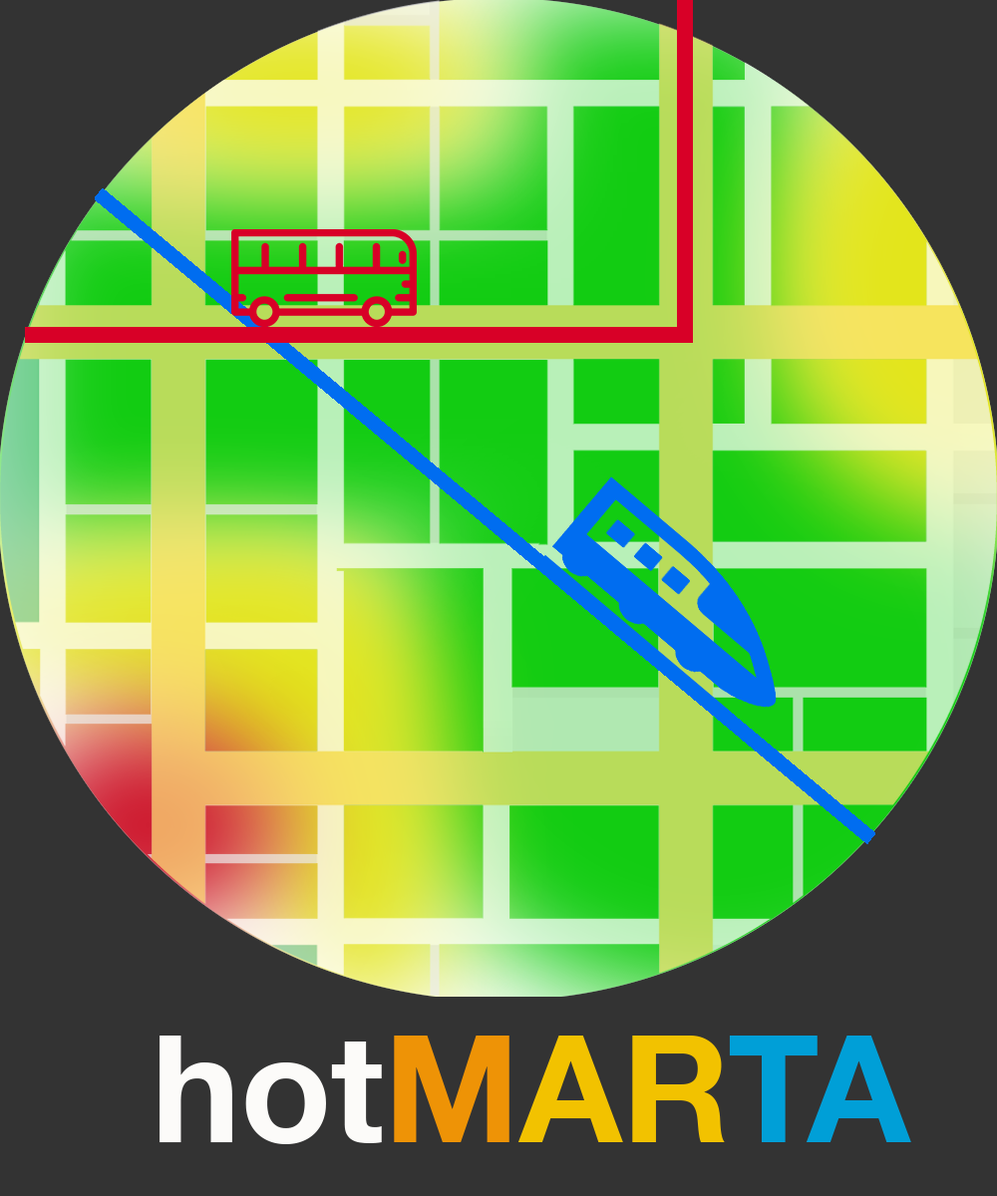
<style>
.page{position:relative;width:997px;height:1196px;background:#333333}
.page>*{position:absolute;margin:0}
.t1{font:149.5px "TUMNeueHelvetica-Bold";color:#fcfbf9}
.t2{font:149.5px "TUMNeueHelvetica-Bold";color:#ee9306}
.t3{font:149.5px "TUMNeueHelvetica-Bold";color:#f2c200}
.t4{font:149.5px "TUMNeueHelvetica-Bold";color:#009fd7}
</style>
<div class="page">
<p class="t1" style="left:159px;top:1036px;width:752px;height:108px">hot<span class="t2">M</span><span class="t3">AR</span><span class="t4">TA</span></p>
</div>
